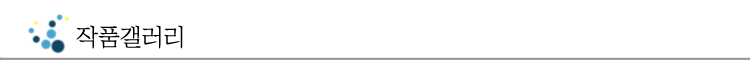
<style>
.page{position:relative;width:750px;height:72px;background:#ffffff}
.page>*{position:absolute;margin:0}
.t1{font:24px "ChosunilboNM";color:#000000}
</style>
<div class="page">
<p class="t1" style="left:76px;top:25px;width:107px;height:24px">작품갤러리</p>
</div>
